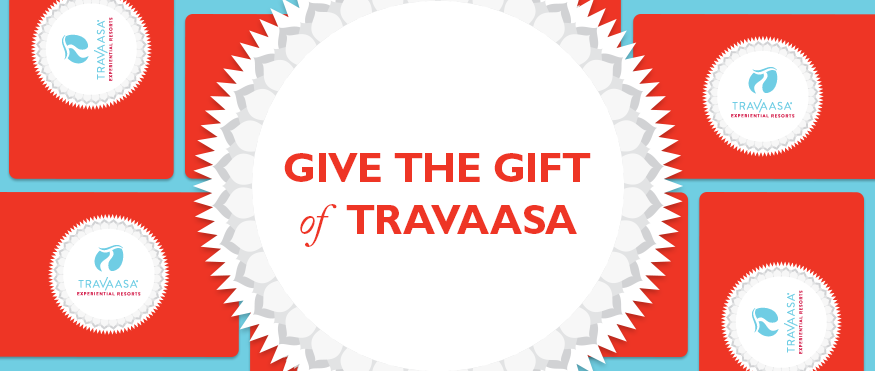
<style>
.page{position:relative;width:875px;height:371px;background:#ffffff}
.page>*{position:absolute;margin:0}
.t1{font:41.2px "GillSansMTPro-Bold";letter-spacing:-0.01em;color:#ee3525}
.t2{font:43.4px "ACaslonPro-Italic";letter-spacing:-0.01em;color:#ee3525}
</style>
<div class="page">
<p class="t1" style="left:284px;top:153px;width:307px;height:94px;text-align:center">GIVE THE GIFT<br><span class="t2">of  </span>TRAVAASA</p>
</div>
